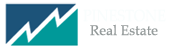
<style>
.page{position:relative;width:170px;height:51px;background:#ffffff}
.page>*{position:absolute;margin:0}
.t1{font:16.5px "PalatinoLinotype-Roman";color:#f9fdfd;scale:0.87 1}
.t2{font:14px "PalatinoLinotype-Roman";color:#969c9c}
</style>
<div class="page">
<p class="t1" style="left:83px;top:9px;width:83px;height:13px">PINESTONE</p>
<p class="t2" style="left:90px;top:24px;width:68px;height:12px">Real Estate</p>
</div>
